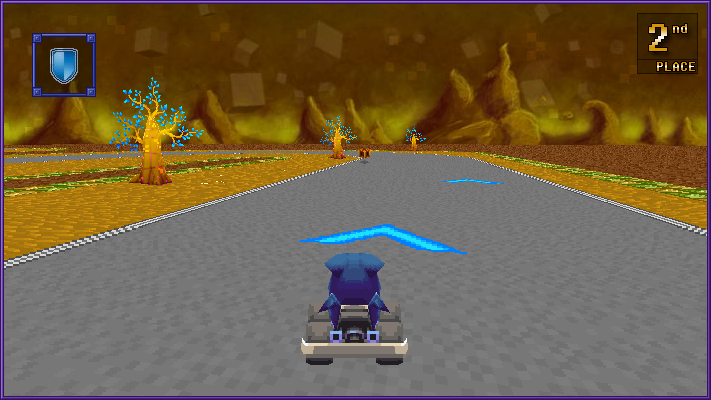
<style>
.page{position:relative;width:711px;height:400px;background:#777777}
.page>*{position:absolute;margin:0}
.t1{font:36px "Fixedsys"}
.t2{font:14px "Fixedsys"}
</style>
<div class="page">
<p class="t1" style="left:649px;top:24px;width:18px;height:27px">2</p>
<p class="t2" style="left:673px;top:24px;width:14px;height:9px">nd</p>
<p class="t2" style="left:657px;top:62px;width:38px;height:9px">PLACE</p>
</div>
